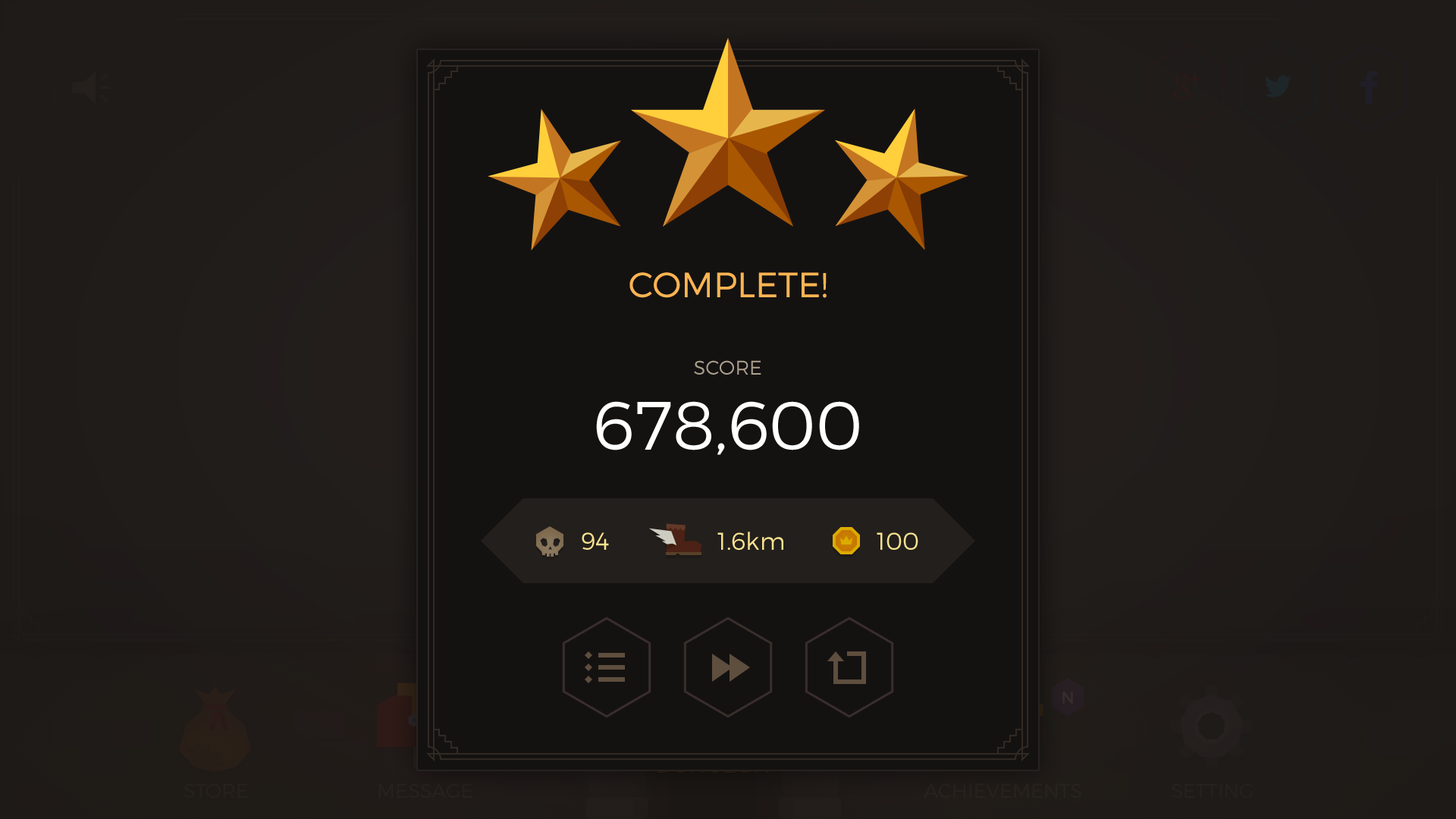
<style>
.page{position:relative;width:1456px;height:819px;background:#141211}
.page>*{position:absolute;margin:0}
.t1{font:35.1px "Montserrat-Light";color:#ffb452;text-transform:uppercase}
.t2{font:19.7px "Montserrat-Light";color:#aea190;text-transform:uppercase}
.t3{font:68.2px "Montserrat-Light";color:#ffffff}
.t4{font:24.3px "Montserrat-Light";color:#f8e390}
</style>
<div class="page">
<p class="t1" style="left:629px;top:272px;width:198px;height:26px">Complete!</p>
<p class="t2" style="left:694px;top:360px;width:67px;height:15px">score</p>
<p class="t3" style="left:596px;top:401px;width:263px;height:54px">678,600</p>
<p class="t4" style="left:582px;top:532px;width:27px;height:18px">94</p>
<p class="t4" style="left:717px;top:532px;width:66px;height:19px">1.6km</p>
<p class="t4" style="left:877px;top:532px;width:41px;height:18px">100</p>
</div>
